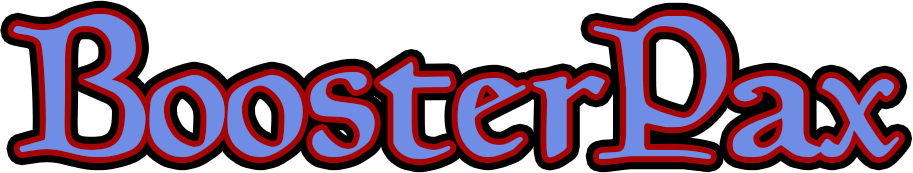
<style>
.page{position:relative;width:913px;height:173px;background:#ffffff}
.page>*{position:absolute;margin:0}
.t1{font:200px "GoudyMedieval";color:#6f8de5}
</style>
<div class="page">
<p class="t1" style="left:13px;top:14px;width:886px;height:145px">BoosterPax</p>
</div>
